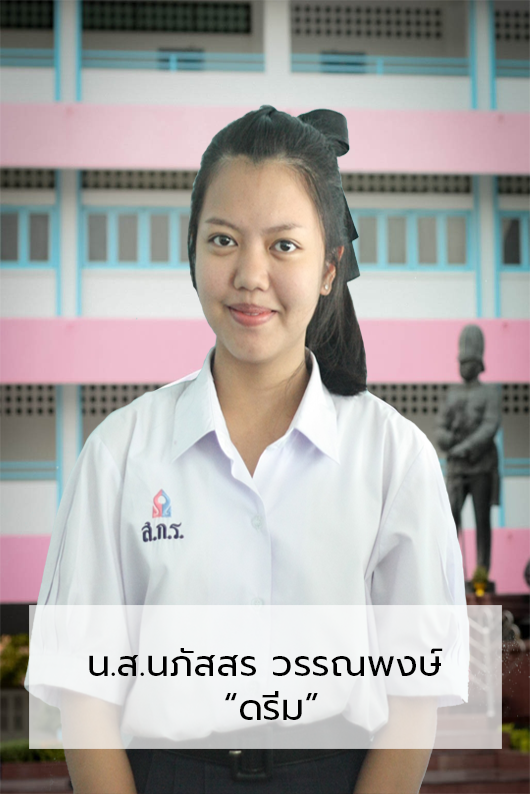
<style>
.page{position:relative;width:530px;height:794px}
.page>*{position:absolute;margin:0}
.t1{font:36.7px "Prompt-Regular";color:#000000}
</style>
<div class="page">
<p class="t1" style="left:89px;top:648px;width:354px;height:72px">น.ส.นภัสสร วรรณพงษ์<br>          “ดรีม”</p>
</div>
